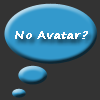
<style>
.page{position:relative;width:100px;height:100px;background:#333333}
.page>*{position:absolute;margin:0}
.t1{font:11px "SegoePrint";color:#ffffff;font-weight:bold}
</style>
<div class="page">
<p class="t1" style="left:15px;top:31px;width:73px;height:8px">No Avatar?</p>
</div>
